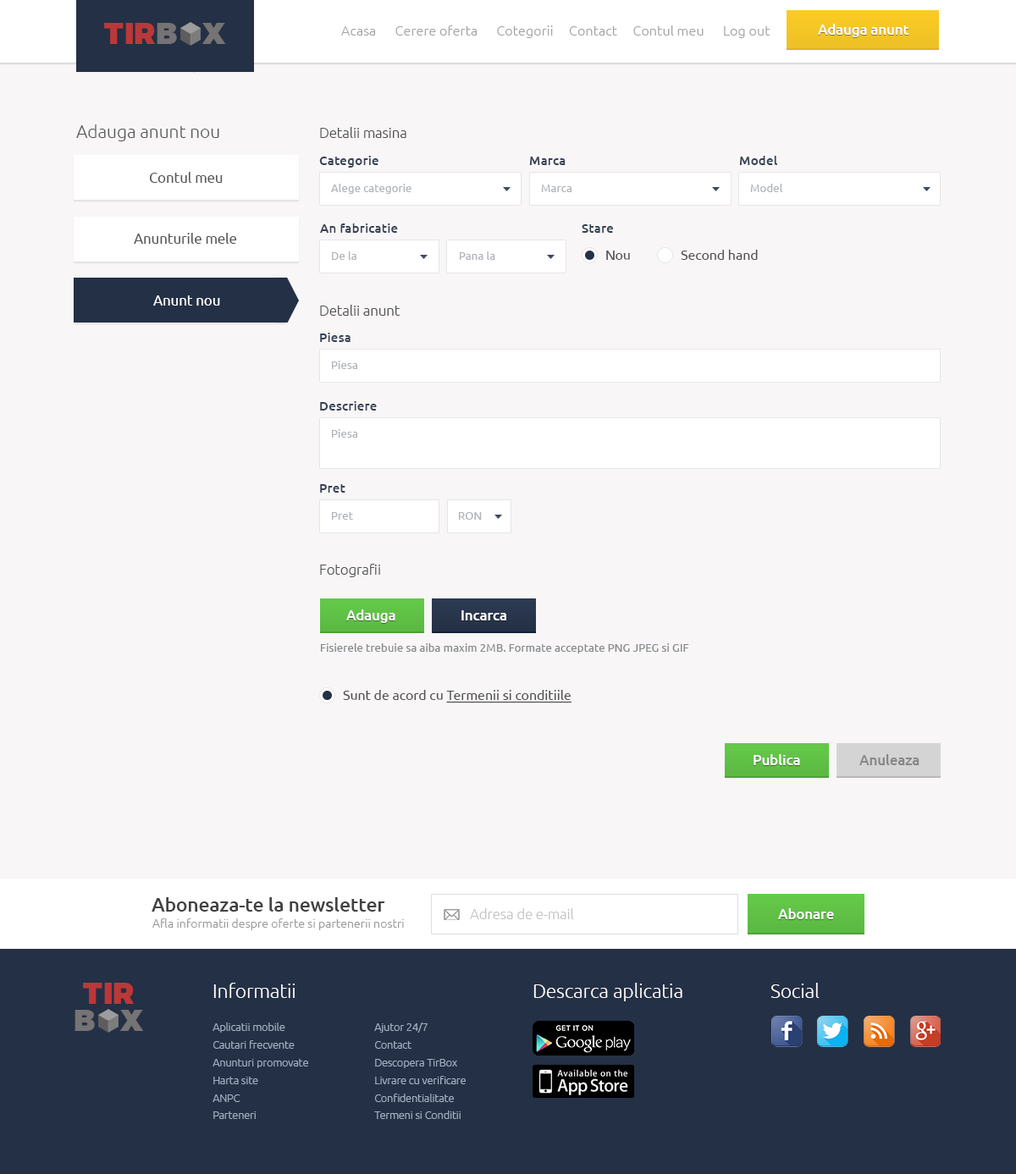
<style>
.page{position:relative;width:1016px;height:1174px;background:#f8f6f6}
.page>*{position:absolute;margin:0}
.t1{font:29.6px "Montserrat-Black";color:#bb3838}
.t2{font:29.6px "Montserrat-Black";letter-spacing:0.04em;color:#bb3838}
.t3{font:29.6px "Montserrat-Black";color:#757373}
.t4{font:13.8px "Ubuntu-Light";color:#a2a3a5}
.t5{font:14.1px "Ubuntu-Medium";color:#ffffff}
.t6{font:17.6px "Ubuntu-Light";color:#545454}
.t7{font:14.1px "Ubuntu-Light";color:#545454}
.t8{font:13px "Ubuntu-Medium";color:#364256}
.t9{font:14.1px "Ubuntu";color:#575757}
.t10{font:11.3px "Ubuntu";color:#b1b4ba}
.t11{font:13.4px "Ubuntu";color:#505153}
.t12{font:14.1px "Ubuntu";color:#ffffff}
.t13{font:11.3px "Ubuntu";color:#86898e}
.t14{font:13.4px "Ubuntu";color:#505153;text-decoration:underline}
.t15{font:14.1px "Ubuntu-Medium";color:#888888}
.t16{font:19px "Ubuntu-Medium";color:#424242}
.t17{font:14.1px "Ubuntu-Light";color:#c5c5c5}
.t18{font:12px "Ubuntu-Light";color:#9b9a9a}
.t19{font:19px "Ubuntu-Light";color:#ffffff}
.t20{font:10.6px/17.6px "Ubuntu-Light";color:#a2aec2}
</style>
<div class="page">
<p class="t1" style="left:104px;top:23px;width:51px;height:21px"><span class="t2">T</span>IR</p>
<p class="t3" style="left:157px;top:23px;width:20px;height:21px">B</p>
<p class="t3" style="left:201px;top:23px;width:25px;height:21px">X</p>
<p class="t4" style="left:341px;top:25px;width:429px;height:13px">Acasa      Cerere oferta      Cotegorii     Contact     Contul meu      Log out</p>
<p class="t5" style="left:818px;top:24px;width:91px;height:13px">Adauga anunt</p>
<p class="t6" style="left:76px;top:124px;width:143px;height:17px">Adauga anunt nou</p>
<p class="t7" style="left:320px;top:127px;width:86px;height:11px">Detalii masina</p>
<p class="t8" style="left:319px;top:156px;width:59px;height:12px">Categorie</p>
<p class="t8" style="left:529px;top:157px;width:36px;height:8px">Marca</p>
<p class="t8" style="left:739px;top:156px;width:38px;height:9px">Model</p>
<p class="t9" style="left:149px;top:172px;width:74px;height:11px">Contul meu</p>
<p class="t10" style="left:331px;top:184px;width:80px;height:10px">Alege categorie</p>
<p class="t10" style="left:541px;top:185px;width:30px;height:7px">Marca</p>
<p class="t10" style="left:750px;top:184px;width:33px;height:8px">Model</p>
<p class="t9" style="left:134px;top:233px;width:103px;height:11px">Anunturile mele</p>
<p class="t8" style="left:320px;top:223px;width:78px;height:10px">An fabricatie</p>
<p class="t8" style="left:581px;top:224px;width:33px;height:9px">Stare</p>
<p class="t10" style="left:332px;top:251px;width:24px;height:9px">De la</p>
<p class="t10" style="left:460px;top:251px;width:35px;height:9px">Pana la</p>
<p class="t11" style="left:606px;top:251px;width:24px;height:9px">Nou</p>
<p class="t11" style="left:681px;top:250px;width:77px;height:10px">Second hand</p>
<p class="t12" style="left:153px;top:295px;width:67px;height:11px">Anunt nou</p>
<p class="t7" style="left:320px;top:305px;width:80px;height:11px">Detalii anunt</p>
<p class="t8" style="left:320px;top:333px;width:30px;height:9px">Piesa</p>
<p class="t10" style="left:332px;top:361px;width:25px;height:8px">Piesa</p>
<p class="t8" style="left:320px;top:401px;width:57px;height:10px">Descriere</p>
<p class="t10" style="left:332px;top:429px;width:25px;height:9px">Piesa</p>
<p class="t8" style="left:320px;top:484px;width:25px;height:9px">Pret</p>
<p class="t10" style="left:332px;top:512px;width:21px;height:8px">Pret</p>
<p class="t10" style="left:459px;top:512px;width:23px;height:8px">RON</p>
<p class="t7" style="left:320px;top:564px;width:60px;height:13px">Fotografii</p>
<p class="t5" style="left:346px;top:609px;width:49px;height:14px">Adauga</p>
<p class="t5" style="left:461px;top:610px;width:45px;height:10px">Incarca</p>
<p class="t13" style="left:321px;top:643px;width:368px;height:10px">Fisierele trebuie sa aiba maxim 2MB. Formate acceptate PNG JPEG si GIF</p>
<p class="t14" style="left:343px;top:690px;width:228px;height:13px"><span class="t11">Sunt de acord cu </span>Termenii si conditiile</p>
<p class="t5" style="left:753px;top:754px;width:47px;height:11px">Publica</p>
<p class="t15" style="left:859px;top:754px;width:60px;height:11px">Anuleaza</p>
<p class="t16" style="left:152px;top:897px;width:233px;height:15px">Aboneaza-te la newsletter</p>
<p class="t17" style="left:470px;top:908px;width:104px;height:11px">Adresa de e-mail</p>
<p class="t5" style="left:778px;top:908px;width:56px;height:11px">Abonare</p>
<p class="t18" style="left:152px;top:918px;width:252px;height:12px">Afla informatii despre oferte si partenerii nostri</p>
<p class="t1" style="left:83px;top:983px;width:51px;height:21px"><span class="t2">T</span>IR</p>
<p class="t19" style="left:213px;top:983px;width:82px;height:15px">Informatii</p>
<p class="t19" style="left:533px;top:983px;width:149px;height:18px">Descarca aplicatia</p>
<p class="t19" style="left:770px;top:983px;width:49px;height:15px">Social</p>
<p class="t3" style="left:74px;top:1010px;width:21px;height:21px">B</p>
<p class="t3" style="left:119px;top:1010px;width:25px;height:21px">X</p>
<p class="t20" style="left:212px;top:1022px;width:96px;height:97px">Aplicatii mobile<br>Cautari frecvente<br>Anunturi promovate<br>Harta site<br>ANPC<br>Parteneri</p>
<p class="t20" style="left:374px;top:1022px;width:92px;height:97px">Ajutor 24/7<br>Contact<br>Descopera TirBox<br>Livrare cu verificare<br>Confidentialitate<br>Termeni si Conditii</p>
</div>
